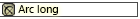
<style>
.page{position:relative;width:140px;height:19px;background:#ffffff}
.page>*{position:absolute;margin:0}
.t1{font:10.9px "LaoUI";color:#000000}
</style>
<div class="page">
<p class="t1" style="left:18px;top:5px;width:40px;height:10px">Arc long</p>
</div>
